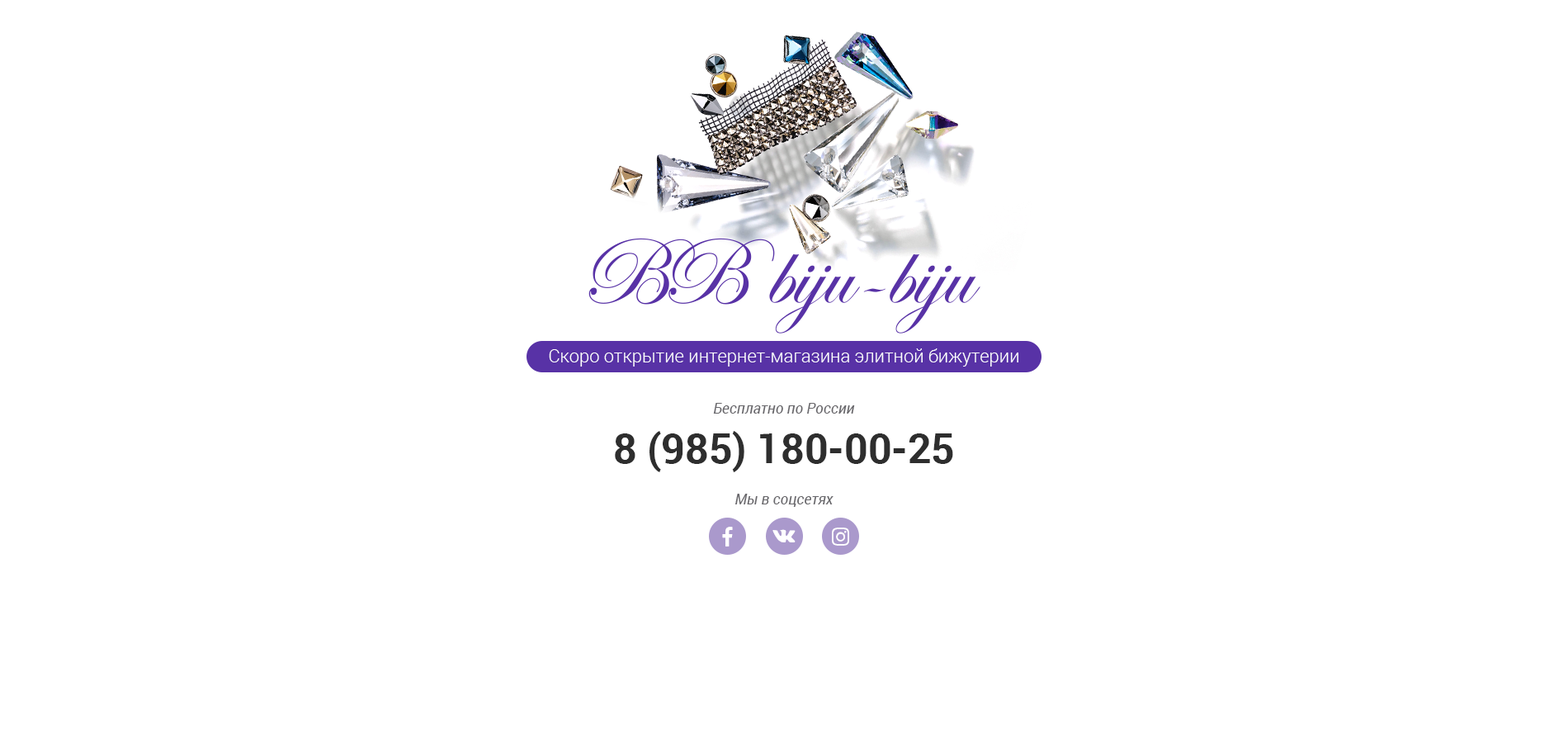
<style>
.page{position:relative;width:1568px;height:743px;background:#ffffff}
.page>*{position:absolute;margin:0}
.t1{font:18.2px "Roboto-Light";color:#ffffff}
.t2{font:14.9px "Roboto-Italic";color:#68676b}
.t3{font:41.3px "Roboto-Bold";color:#2e2e2e}
</style>
<div class="page">
<p class="t1" style="left:549px;top:348px;width:469px;height:18px">Скоро открытие интернет-магазина элитной бижутерии</p>
<p class="t2" style="left:713px;top:403px;width:142px;height:10px">Бесплатно по России</p>
<p class="t3" style="left:615px;top:431px;width:338px;height:41px">8 (985) 180-00-25</p>
<p class="t2" style="left:735px;top:494px;width:99px;height:13px">Мы в соцсетях</p>
</div>
